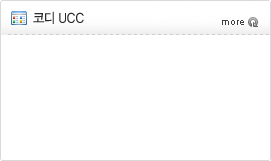
<style>
.page{position:relative;width:271px;height:161px;background:#ffffff}
.page>*{position:absolute;margin:0}
.t1{font:13.8px "YDIYGO330";color:#2b2b2b;scale:0.91 1}
.t2{font:13.8px "YDIYGO330";letter-spacing:-0.05em;color:#2b2b2b;scale:0.91 1}
.t3{font:10px "ArialMT";color:#424242}
</style>
<div class="page">
<p class="t1" style="left:33px;top:11px;width:51px;height:13px"><span class="t2">코디 </span>UCC</p>
<p class="t3" style="left:222px;top:20px;width:22px;height:5px">more</p>
</div>
